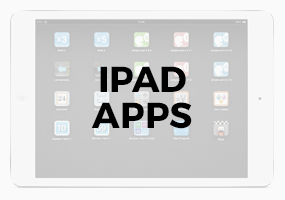
<style>
.page{position:relative;width:285px;height:200px}
.page>*{position:absolute;margin:0}
.t1{font:36px/36px "Montserrat-Bold";color:#000000}
</style>
<div class="page">
<p class="t1" style="left:91px;top:66px;width:101px;height:63px;text-align:center">IPAD<br>APPS</p>
</div>
